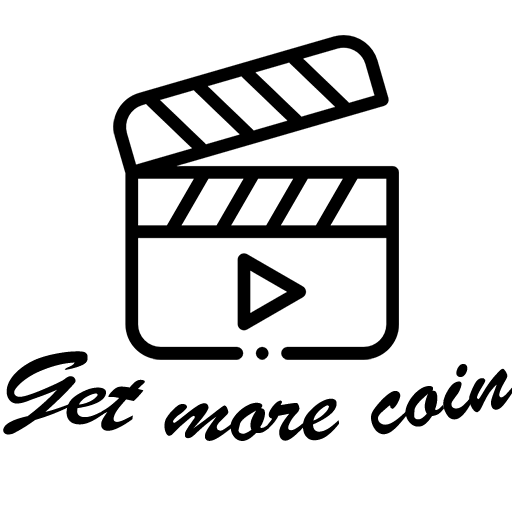
<style>
.page{position:relative;width:512px;height:512px;background:#ffffff}
.page>*{position:absolute;margin:0}
.t1{font:108.3px "BrushScriptMT";color:#000000}
</style>
<div class="page">
<p class="t1" style="left:3px;top:351px;width:511px;height:90px">Get more coin</p>
</div>
